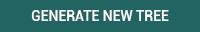
<style>
.page{position:relative;width:200px;height:32px;background:#216462}
.page>*{position:absolute;margin:0}
.t1{font:14px "Roboto-Medium";color:#ffffff}
</style>
<div class="page">
<p class="t1" style="left:31px;top:10px;width:138px;height:11px">GENERATE NEW TREE</p>
</div>
